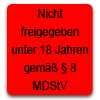
<style>
.page{position:relative;width:100px;height:100px;background:#ff0000}
.page>*{position:absolute;margin:0}
.t1{font:12.1px/18px "ArialMT";color:#020202;scale:0.91 1}
.t2{font:10px "Verdana";color:#020202}
</style>
<div class="page">
<p class="t1" style="left:12px;top:9px;width:76px;height:81px;text-align:center"><span class="t2"><br></span>Nicht<br>freigegeben<br>unter 18 Jahren<br>gemäß § 8<br>MDStV</p>
</div>
